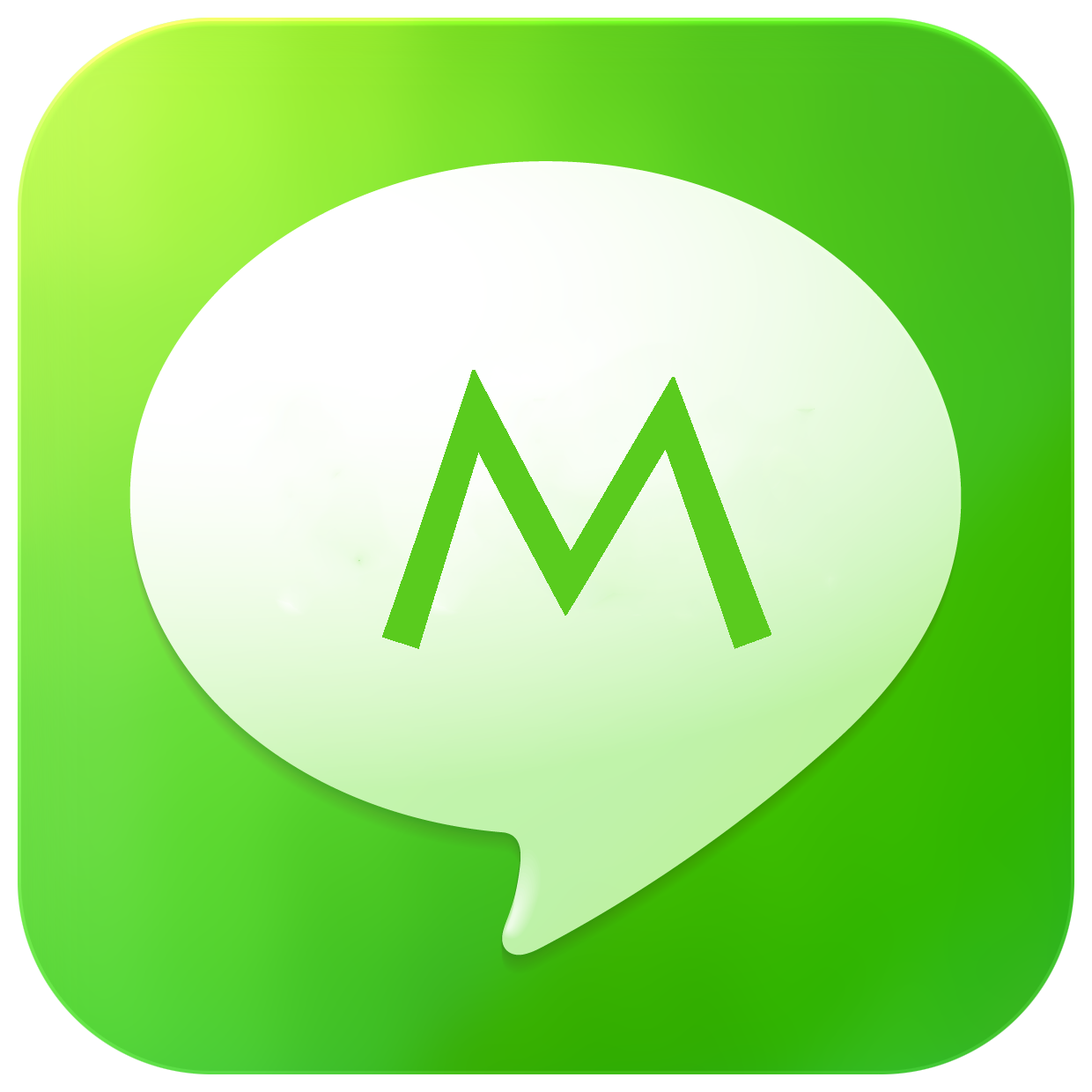
<style>
.page{position:relative;width:1092px;height:1092px}
.page>*{position:absolute;margin:0}
.t1{font:440.3px "LithosPro-Regular";color:#59cb1e}
</style>
<div class="page">
<p class="t1" style="left:382px;top:370px;width:389px;height:279px">m</p>
</div>
